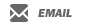
<style>
.page{position:relative;width:106px;height:26px;background:#ffffff}
.page>*{position:absolute;margin:0}
.t1{font:12px "FranklinGothic-HeavyItal";letter-spacing:-0.01em;color:#666666;text-transform:uppercase}
</style>
<div class="page">
<p class="t1" style="left:38px;top:9px;width:34px;height:8px">Email</p>
</div>
